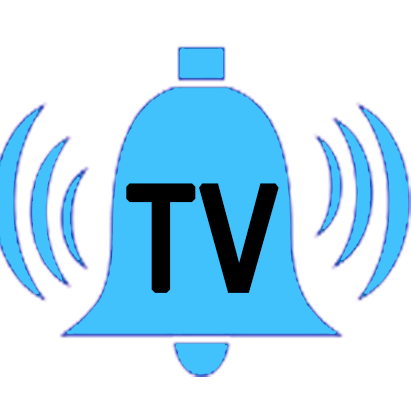
<style>
.page{position:relative;width:411px;height:412px;background:#ffffff}
.page>*{position:absolute;margin:0}
.t1{font:160.5px "Consolas";color:#000000;font-weight:bold;scale:0.83 1}
</style>
<div class="page">
<p class="t1" style="left:126px;top:183px;width:153px;height:110px">TV</p>
</div>
